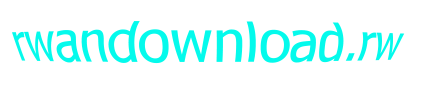
<style>
.page{position:relative;width:425px;height:85px;background:#ffffff}
.page>*{position:absolute;margin:0}
.t1{font:49px "Tahoma";color:#04faec}
</style>
<div class="page">
<p class="t1" style="left:12px;top:21px;width:393px;height:43px">rwandownload.rw</p>
</div>
